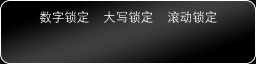
<style>
.page{position:relative;width:256px;height:64px}
.page>*{position:absolute;margin:0}
.t1{font:12.5px "DengXian";color:#ffffff}
</style>
<div class="page">
<p class="t1" style="left:40px;top:11px;width:49px;height:12px">数字锁定</p>
<p class="t1" style="left:104px;top:11px;width:49px;height:12px">大写锁定</p>
<p class="t1" style="left:168px;top:11px;width:49px;height:12px">滚动锁定</p>
</div>
